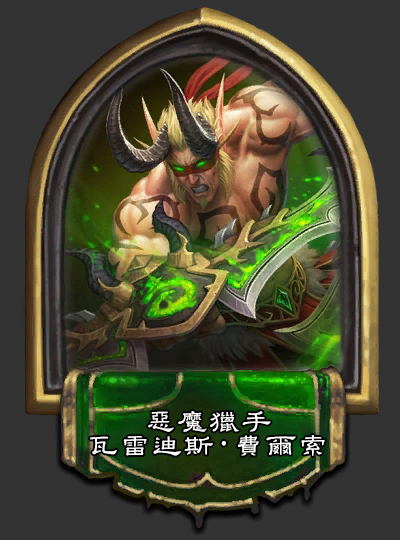
<style>
.page{position:relative;width:400px;height:540px;background:#333333}
.page>*{position:absolute;margin:0}
.t1{font:32px/21.3px "DFSTDLI-Md-HK-BF";color:#ffffff}
.t2{font:32px/21.3px "SourceHanSansCN-Regular";color:#ffffff}
</style>
<div class="page">
<p class="t1" style="left:90px;top:411px;width:235px;height:45px;text-align:center">惡魔獵手<br>瓦雷迪斯<span class="t2">·</span>費爾索</p>
</div>
